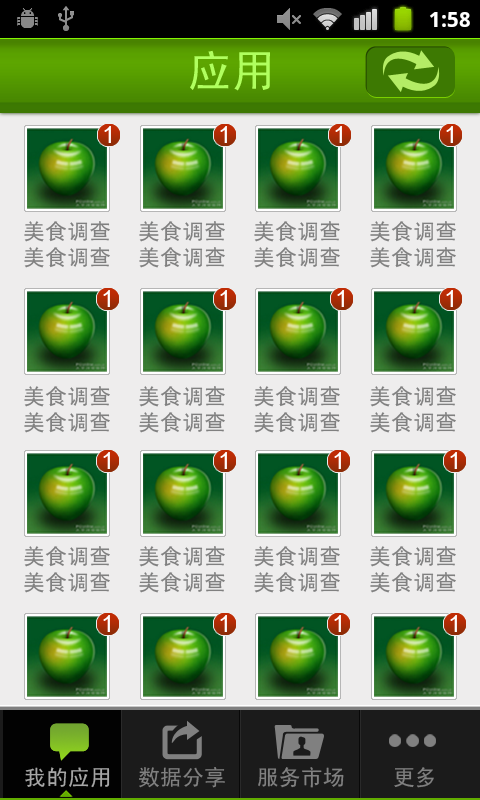
<style>
.page{position:relative;width:480px;height:800px;background:#eeeded}
.page>*{position:absolute;margin:0}
.t1{font:44px "SimHei";color:#b0ff5f}
.t2{font:23px "ArialMT";color:#fffefe}
.t3{font:22px/26px "SimHei";color:#808080}
.t4{font:22px "SimHei";color:#a6a6a6}
.t5{font:22px "SimHei";color:#808080}
</style>
<div class="page">
<p class="t1" style="left:190px;top:50px;width:80px;height:41px">应用</p>
<p class="t2" style="left:104px;top:126px;width:7px;height:17px">1</p>
<p class="t2" style="left:220px;top:126px;width:7px;height:17px">1</p>
<p class="t2" style="left:335px;top:126px;width:7px;height:17px">1</p>
<p class="t2" style="left:446px;top:126px;width:7px;height:17px">1</p>
<p class="t3" style="left:24px;top:221px;width:86px;height:47px">美食调查<br>美食调查</p>
<p class="t3" style="left:139px;top:221px;width:86px;height:47px">美食调查<br>美食调查</p>
<p class="t3" style="left:254px;top:221px;width:86px;height:47px">美食调查<br>美食调查</p>
<p class="t3" style="left:370px;top:221px;width:86px;height:47px">美食调查<br>美食调查</p>
<p class="t2" style="left:103px;top:290px;width:7px;height:17px">1</p>
<p class="t2" style="left:220px;top:290px;width:7px;height:17px">1</p>
<p class="t2" style="left:337px;top:290px;width:7px;height:17px">1</p>
<p class="t2" style="left:446px;top:290px;width:7px;height:17px">1</p>
<p class="t3" style="left:24px;top:386px;width:86px;height:47px">美食调查<br>美食调查</p>
<p class="t3" style="left:139px;top:386px;width:86px;height:47px">美食调查<br>美食调查</p>
<p class="t3" style="left:254px;top:386px;width:86px;height:47px">美食调查<br>美食调查</p>
<p class="t3" style="left:370px;top:386px;width:86px;height:47px">美食调查<br>美食调查</p>
<p class="t2" style="left:103px;top:452px;width:7px;height:17px">1</p>
<p class="t2" style="left:220px;top:452px;width:7px;height:17px">1</p>
<p class="t2" style="left:334px;top:452px;width:7px;height:17px">1</p>
<p class="t2" style="left:450px;top:452px;width:7px;height:17px">1</p>
<p class="t3" style="left:24px;top:546px;width:86px;height:47px">美食调查<br>美食调查</p>
<p class="t3" style="left:139px;top:546px;width:86px;height:47px">美食调查<br>美食调查</p>
<p class="t3" style="left:254px;top:546px;width:86px;height:47px">美食调查<br>美食调查</p>
<p class="t3" style="left:370px;top:546px;width:86px;height:47px">美食调查<br>美食调查</p>
<p class="t2" style="left:103px;top:615px;width:7px;height:17px">1</p>
<p class="t2" style="left:220px;top:615px;width:7px;height:17px">1</p>
<p class="t2" style="left:334px;top:615px;width:7px;height:17px">1</p>
<p class="t2" style="left:450px;top:615px;width:7px;height:17px">1</p>
<p class="t4" style="left:25px;top:767px;width:85px;height:21px">我的应用</p>
<p class="t5" style="left:139px;top:767px;width:86px;height:21px">数据分享</p>
<p class="t5" style="left:258px;top:767px;width:86px;height:21px">服务市场</p>
<p class="t5" style="left:394px;top:767px;width:40px;height:21px">更多</p>
</div>
